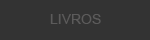
<style>
.page{position:relative;width:150px;height:40px;background:#333333}
.page>*{position:absolute;margin:0}
.t1{font:14px "ArialMT";color:#5c5b5b}
</style>
<div class="page">
<p class="t1" style="left:50px;top:14px;width:51px;height:10px">LIVROS</p>
</div>
